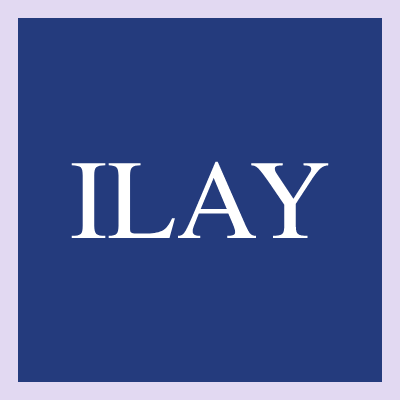
<style>
.page{position:relative;width:400px;height:400px;background:#243b7d}
.page>*{position:absolute;margin:0}
.t1{font:113px "NimbusRomNo9L-Reg";color:#ffffff}
</style>
<div class="page">
<p class="t1" style="left:71px;top:161px;width:258px;height:77px">ILAY</p>
</div>
